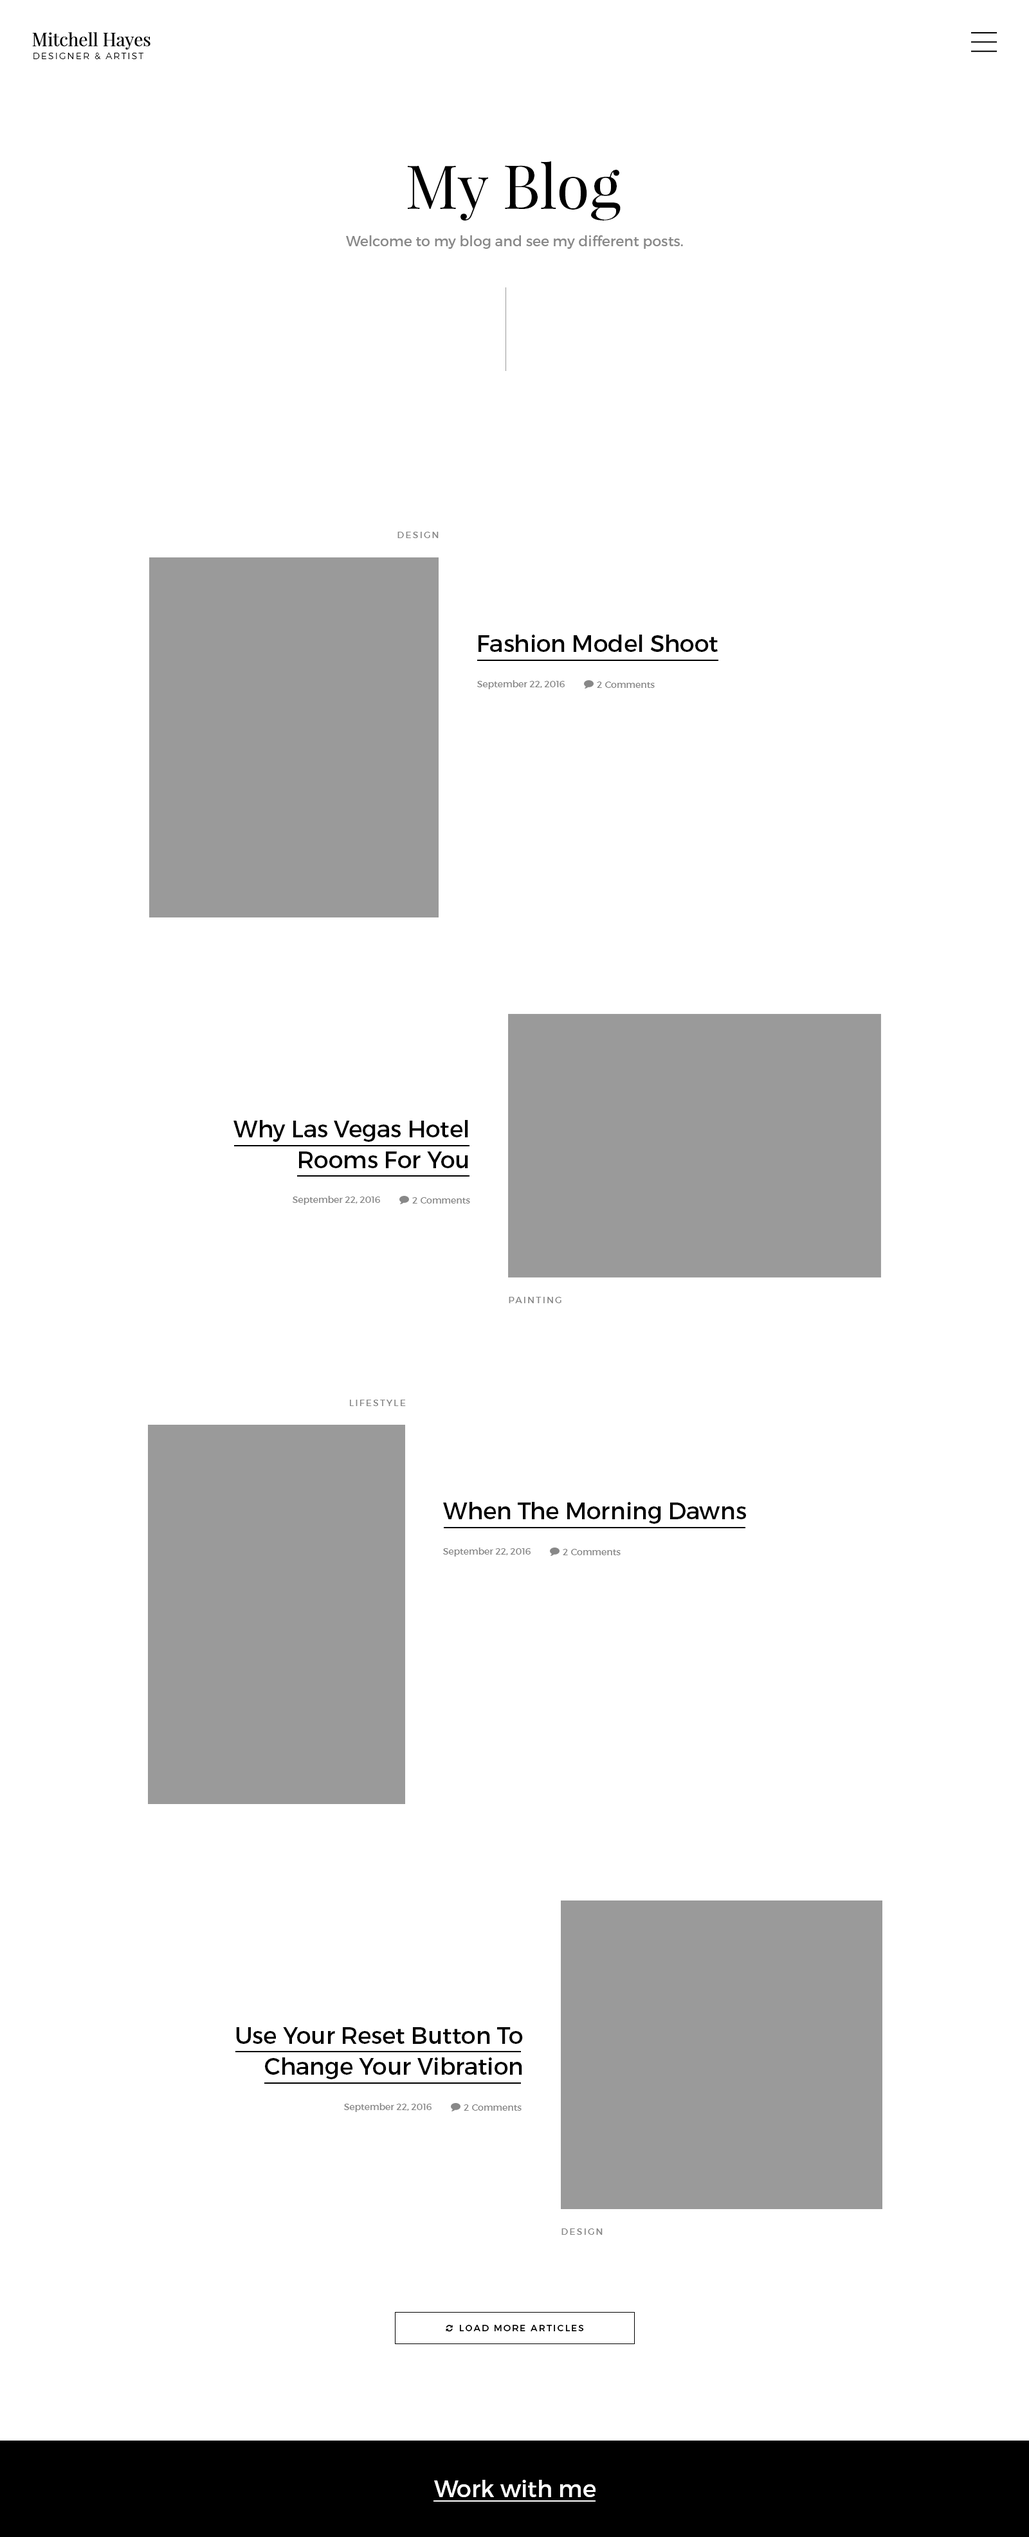
<style>
.page{position:relative;width:1029px;height:2537px;background:#ffffff}
.page>*{position:absolute;margin:0}
.t1{font:18px "PlayfairDisplay-Regular";color:#000000}
.t2{font:9px "Montserrat-Light";letter-spacing:0.15em;color:#000000}
.t3{font:61.1px "PlayfairDisplay-Regular";color:#000000}
.t4{font:14.1px "Montserrat-Regular";color:#888888}
.t5{font:9px "Montserrat-Regular";letter-spacing:0.15em;color:#888888}
.t6{font:23.1px "Montserrat-Regular";color:#000000}
.t7{font:9px "Montserrat-Regular";color:#888888}
.t8{font:23.1px/30.9px "Montserrat-Regular";color:#000000}
.t9{font:23.1px/30.9px "Montserrat-Regular";color:#010101}
.t10{font:9px "Montserrat-Regular";letter-spacing:0.15em;color:#000000}
.t11{font:23.1px "Montserrat-Regular";color:#ffffff}
</style>
<div class="page">
<p class="t1" style="left:32px;top:32px;width:118px;height:18px">Mitchell Hayes</p>
<p class="t2" style="left:33px;top:53px;width:110px;height:6px">DESIGNER &amp; ARTIST</p>
<p class="t3" style="left:408px;top:161px;width:212px;height:60px">My Blog</p>
<p class="t4" style="left:346px;top:235px;width:337px;height:14px">Welcome to my blog and see my different posts.</p>
<p class="t5" style="left:397px;top:532px;width:41px;height:6px">DESIGN</p>
<p class="t6" style="left:478px;top:634px;width:239px;height:18px">Fashion Model Shoot</p>
<p class="t7" style="left:477px;top:680px;width:87px;height:9px">September 22, 2016</p>
<p class="t7" style="left:597px;top:681px;width:5px;height:7px">2</p>
<p class="t7" style="left:605px;top:681px;width:49px;height:7px">Comments</p>
<p class="t8" style="left:233px;top:1120px;width:235px;height:48px;text-align:right">Why Las Vegas Hotel<br>Rooms For You</p>
<p class="t7" style="left:292px;top:1196px;width:88px;height:9px">September 22, 2016</p>
<p class="t7" style="left:412px;top:1197px;width:5px;height:6px">2</p>
<p class="t7" style="left:420px;top:1197px;width:50px;height:6px">Comments</p>
<p class="t5" style="left:509px;top:1297px;width:52px;height:6px">PAINTING</p>
<p class="t5" style="left:350px;top:1400px;width:56px;height:6px">LIFESTYLE</p>
<p class="t6" style="left:443px;top:1502px;width:303px;height:22px">When The Morning Dawns</p>
<p class="t7" style="left:443px;top:1547px;width:87px;height:9px">September 22, 2016</p>
<p class="t7" style="left:562px;top:1549px;width:6px;height:6px">2</p>
<p class="t7" style="left:571px;top:1549px;width:49px;height:6px">Comments</p>
<p class="t9" style="left:236px;top:2027px;width:287px;height:52px;text-align:right">Use Your Reset Button To<br>Change Your Vibration</p>
<p class="t7" style="left:344px;top:2103px;width:87px;height:9px">September 22, 2016</p>
<p class="t7" style="left:464px;top:2104px;width:5px;height:6px">2</p>
<p class="t7" style="left:472px;top:2104px;width:49px;height:6px">Comments</p>
<p class="t5" style="left:561px;top:2228px;width:41px;height:7px">DESIGN</p>
<p class="t10" style="left:460px;top:2325px;width:124px;height:6px">LOAD MORE ARTICLES</p>
<p class="t11" style="left:434px;top:2480px;width:161px;height:17px">Work with me</p>
</div>
